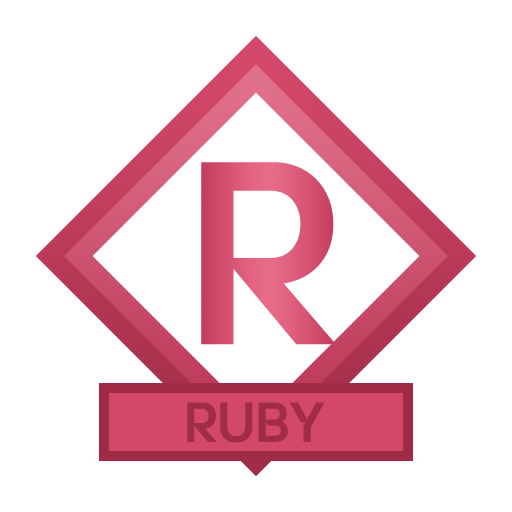
<style>
.page{position:relative;width:512px;height:512px;background:#ffffff}
.page>*{position:absolute;margin:0}
.t1{font:231.8px "yspotlight-regular";color:#d65371}
.t2{font:50px "yspotlight-regular";color:#a02c48}
</style>
<div class="page">
<p class="t1" style="left:201px;top:162px;width:135px;height:183px">R</p>
<p class="t2" style="left:187px;top:402px;width:138px;height:41px">RUBY</p>
</div>
